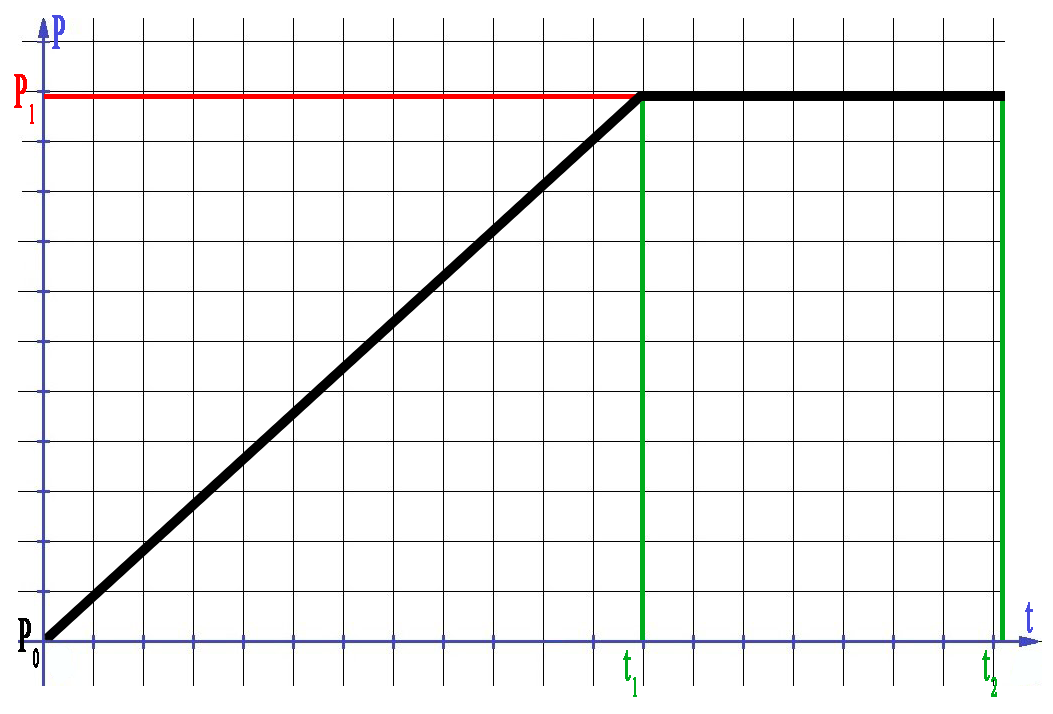
<style>
.page{position:relative;width:1053px;height:714px;background:#ffffff}
.page>*{position:absolute;margin:0}
.t1{font:49.6px "TimesNewRomanPSMT";letter-spacing:0.02em;color:#484ce1;font-weight:bold;scale:0.5 1}
.t2{font:49.6px "TimesNewRomanPSMT";letter-spacing:0.02em;color:#ff0000;font-weight:bold;scale:0.5 1}
.t3{font:49.6px "TimesNewRomanPSMT";letter-spacing:0.02em;color:#000000;font-weight:bold;scale:0.5 1}
.t4{font:49.6px "TimesNewRomanPSMT";letter-spacing:0.02em;color:#00ac1c;font-weight:bold;scale:0.5 1}
</style>
<div class="page">
<p class="t1" style="left:52px;top:15px;width:13px;height:34px">P</p>
<p class="t2" style="left:14px;top:74px;width:20px;height:50px">P1</p>
<p class="t1" style="left:1025px;top:602px;width:8px;height:31px">t</p>
<p class="t3" style="left:18px;top:618px;width:21px;height:50px">P0</p>
<p class="t4" style="left:623px;top:650px;width:14px;height:47px">t1</p>
<p class="t4" style="left:982px;top:650px;width:15px;height:47px">t2</p>
</div>
